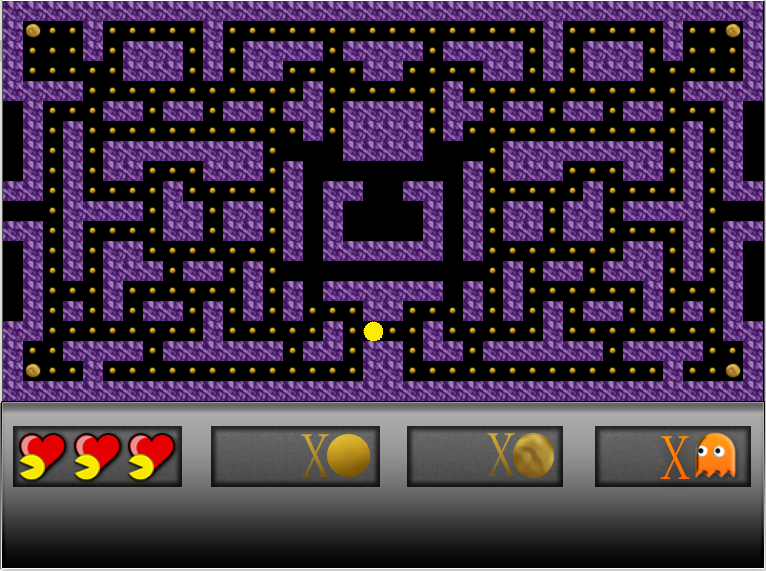
<style>
.page{position:relative;width:766px;height:571px;background:#000000}
.page>*{position:absolute;margin:0}
.t1{font:64px "NSimSun"}
.t2{font:64px "NSimSun";color:#ff7500}
</style>
<div class="page">
<p class="t1" style="left:300px;top:434px;width:30px;height:43px">X</p>
<p class="t1" style="left:486px;top:433px;width:30px;height:43px">X</p>
<p class="t2" style="left:660px;top:436px;width:30px;height:43px">X</p>
</div>
